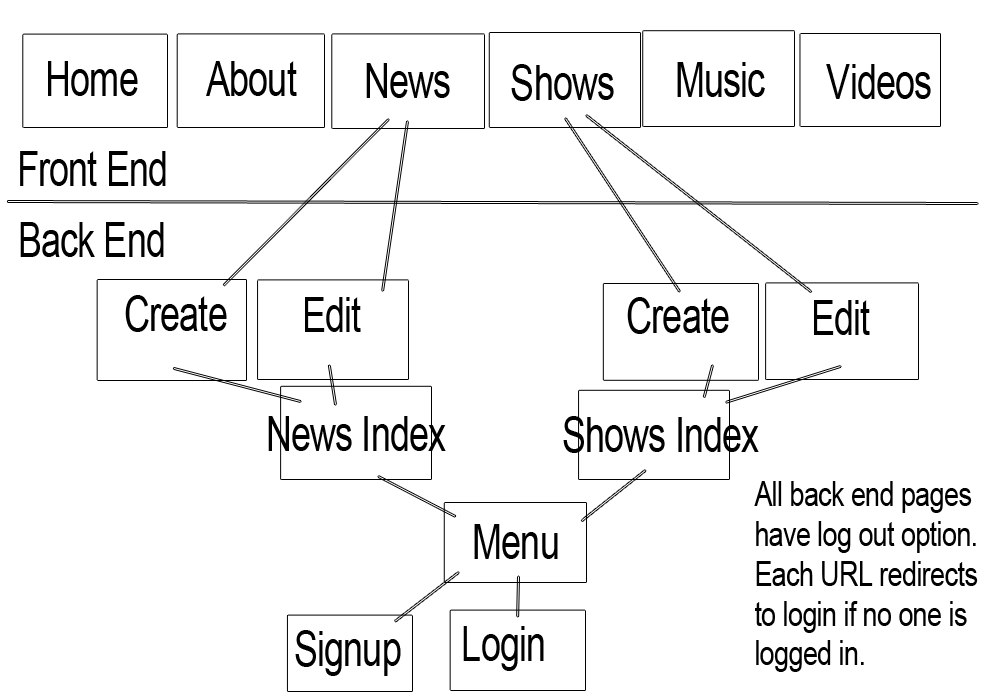
<style>
.page{position:relative;width:1000px;height:700px;background:#ffffff}
.page>*{position:absolute;margin:0}
.t1{font:48.7px "ArialMT";letter-spacing:-0.02em;color:#000000;scale:0.73 1}
.t2{font:34.2px/39.9px "ArialMT";letter-spacing:-0.02em;color:#000000;scale:0.78 1}
</style>
<div class="page">
<p class="t1" style="left:48px;top:61px;width:90px;height:35px">Home</p>
<p class="t1" style="left:206px;top:61px;width:91px;height:35px">About</p>
<p class="t1" style="left:366px;top:63px;width:84px;height:35px">News</p>
<p class="t1" style="left:511px;top:64px;width:103px;height:37px">Shows</p>
<p class="t1" style="left:677px;top:62px;width:88px;height:35px">Music</p>
<p class="t1" style="left:826px;top:64px;width:105px;height:35px">Videos</p>
<p class="t1" style="left:20px;top:151px;width:146px;height:35px">Front End</p>
<p class="t1" style="left:20px;top:222px;width:144px;height:35px">Back End</p>
<p class="t1" style="left:125px;top:295px;width:102px;height:37px">Create</p>
<p class="t1" style="left:305px;top:297px;width:56px;height:35px">Edit</p>
<p class="t1" style="left:627px;top:297px;width:102px;height:37px">Create</p>
<p class="t1" style="left:814px;top:300px;width:56px;height:35px">Edit</p>
<p class="t1" style="left:268px;top:416px;width:178px;height:35px">News Index</p>
<p class="t1" style="left:563px;top:416px;width:196px;height:37px">Shows Index</p>
<p class="t2" style="left:754px;top:481px;width:224px;height:191px">All back end pages<br>have log out option.<br>Each URL redirects<br>to login if no one is<br>logged in.</p>
<p class="t1" style="left:474px;top:524px;width:84px;height:35px">Menu</p>
<p class="t1" style="left:295px;top:630px;width:106px;height:46px">Signup</p>
<p class="t1" style="left:463px;top:626px;width:81px;height:45px">Login</p>
</div>
